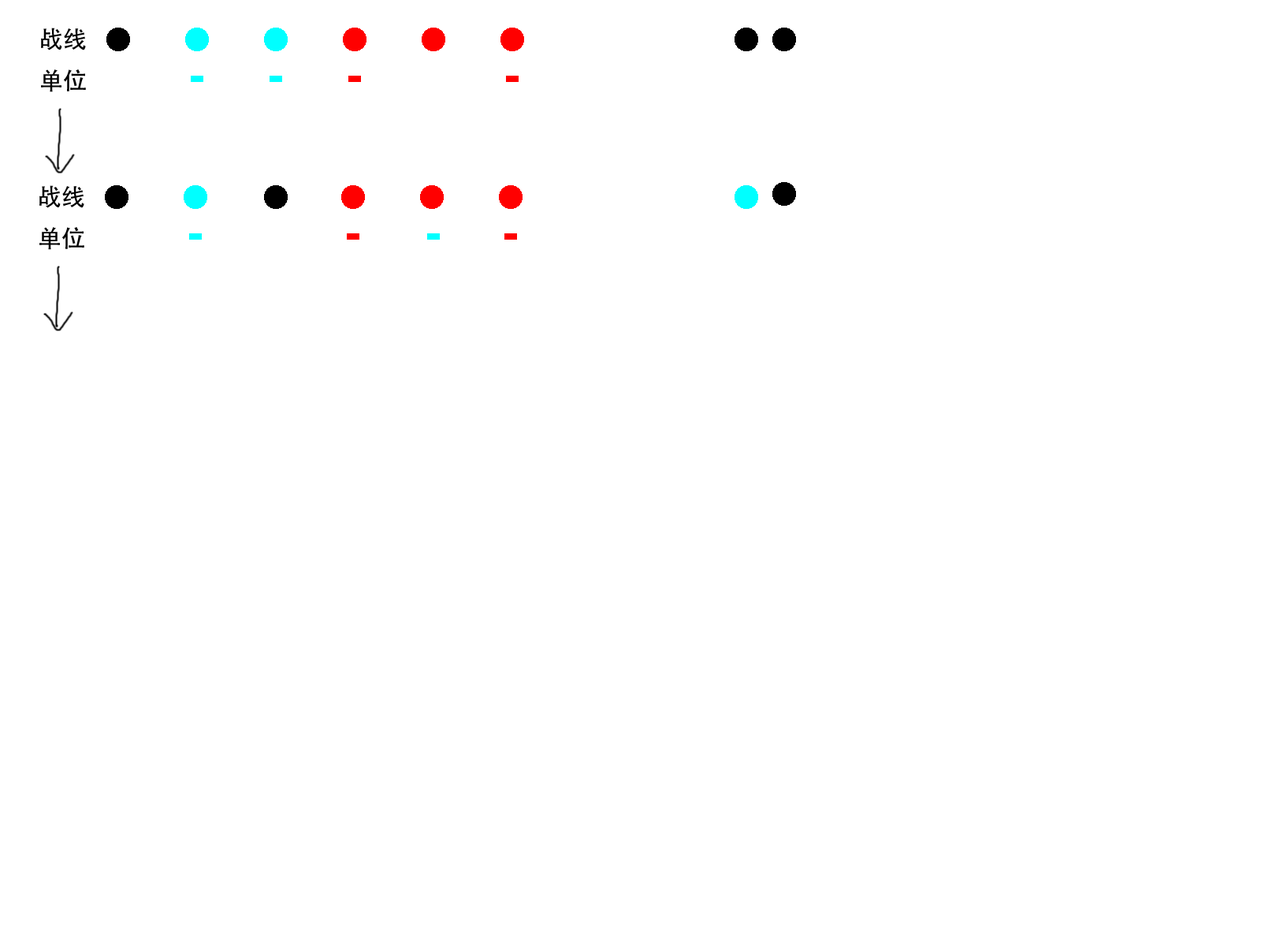
<style>
.page{position:relative;width:1261px;height:946px;background:#ffffff}
.page>*{position:absolute;margin:0}
.t1{font:23.6px "AdobeHeitiStd-Regular";color:#000000}
</style>
<div class="page">
<p class="t1" style="left:41px;top:28px;width:45px;height:64px">战线<br>单位</p>
<p class="t1" style="left:39px;top:185px;width:45px;height:65px">战线<br>单位</p>
</div>
